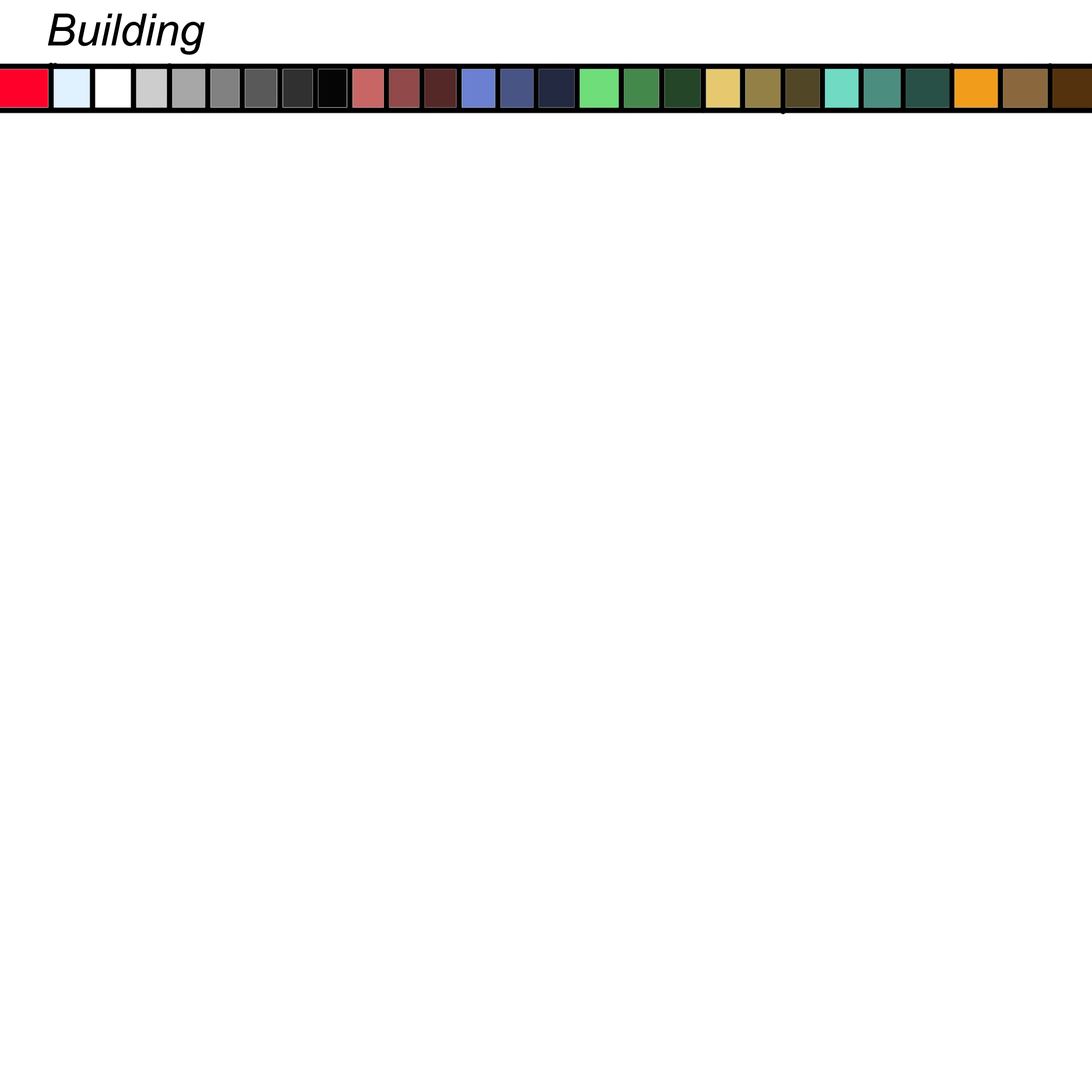
<style>
.page{position:relative;width:1092px;height:1092px;background:#ffffff}
.page>*{position:absolute;margin:0}
.t1{font:44.4px "Arial-ItalicMT";color:#000000}
</style>
<div class="page">
<p class="t1" style="left:48px;top:13px;width:157px;height:42px">Building</p>
</div>
